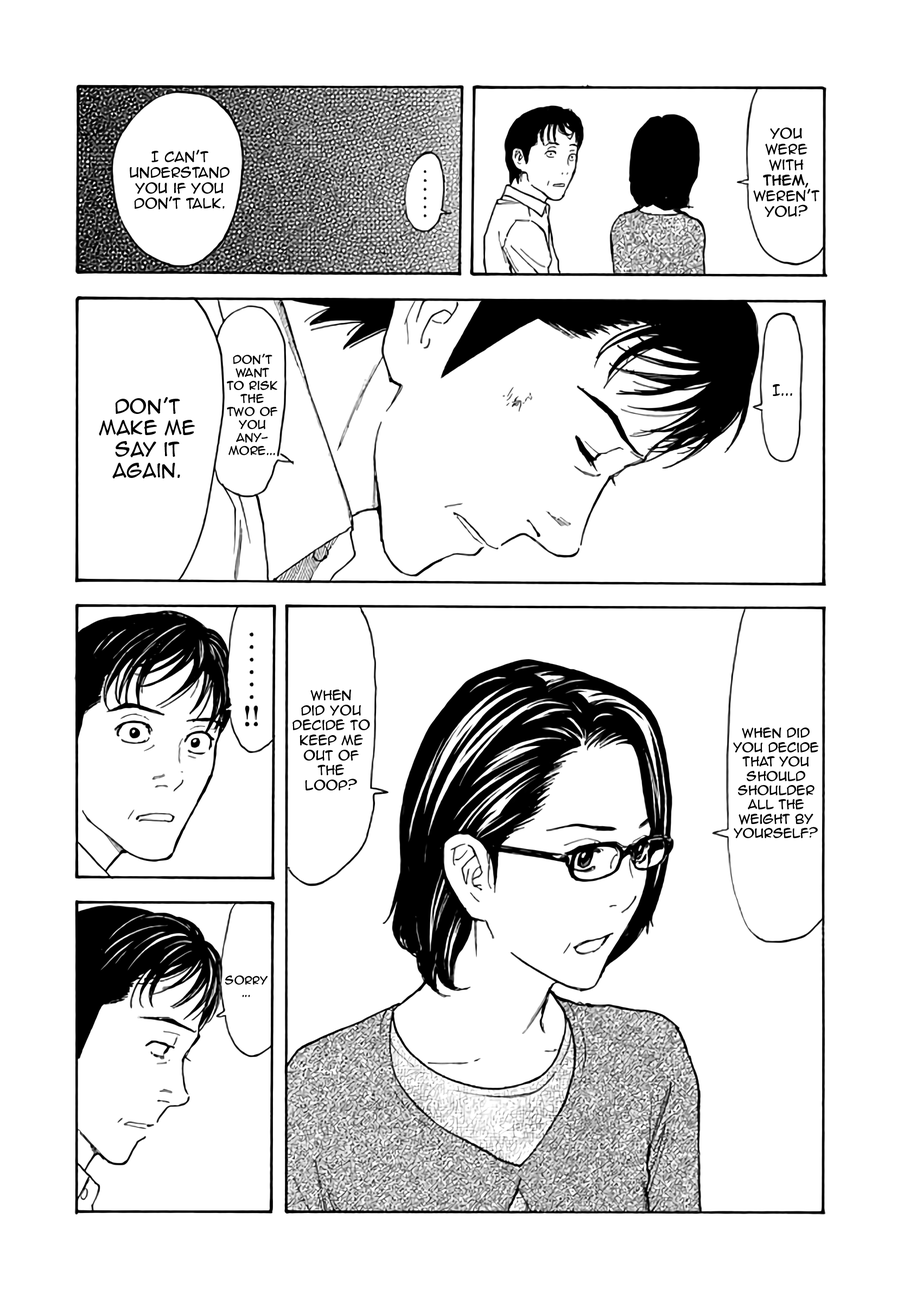
<style>
.page{position:relative;width:916px;height:1302px;background:#ffffff}
.page>*{position:absolute;margin:0}
.t1{font:13px "AnimeAce2.0BB";color:#000000}
.t2{font:13px "AnimeAce2.0BB";color:#000000;font-weight:bold}
.t3{font:10.9px "AnimeAce2.0BB";color:#000000}
.t4{font:13.6px "AnimeAce2.0BB";color:#000000}
.t5{font:17.9px "AnimeAce2.0BB";color:#000000}
.t6{font:12.5px "AnimeAce2.0BB";color:#000000}
.t7{font:11.9px "AnimeAce2.0BB";color:#000000}
.t8{font:10.3px "AnimeAce2.0BB";color:#000000}
</style>
<div class="page">
<p class="t1" style="left:753px;top:127px;width:66px;height:90px;text-align:center">You<br>were with <span class="t2">them</span>, weren’t you?</p>
<p class="t1" style="left:130px;top:150px;width:99px;height:59px;text-align:center">I can’t <br>understand you if you don't talk.</p>
<p class="t3" style="left:227px;top:354px;width:51px;height:101px;text-align:center">don’t Want to risk the two of you anymore...</p>
<p class="t4" style="left:773px;top:384px;width:19px;height:12px">I...</p>
<p class="t5" style="left:99px;top:397px;width:96px;height:82px;text-align:center">Don’t make me say it again.</p>
<p class="t6" style="left:292px;top:690px;width:78px;height:100px;text-align:center">When <br>did you decide to keep me out of the <br>loop?</p>
<p class="t7" style="left:733px;top:728px;width:86px;height:110px;text-align:center">When did you decide that you should shoulder all the weight by yourself?</p>
<p class="t8" style="left:225px;top:975px;width:43px;height:22px;text-align:center">Sorry<br>...</p>
</div>
